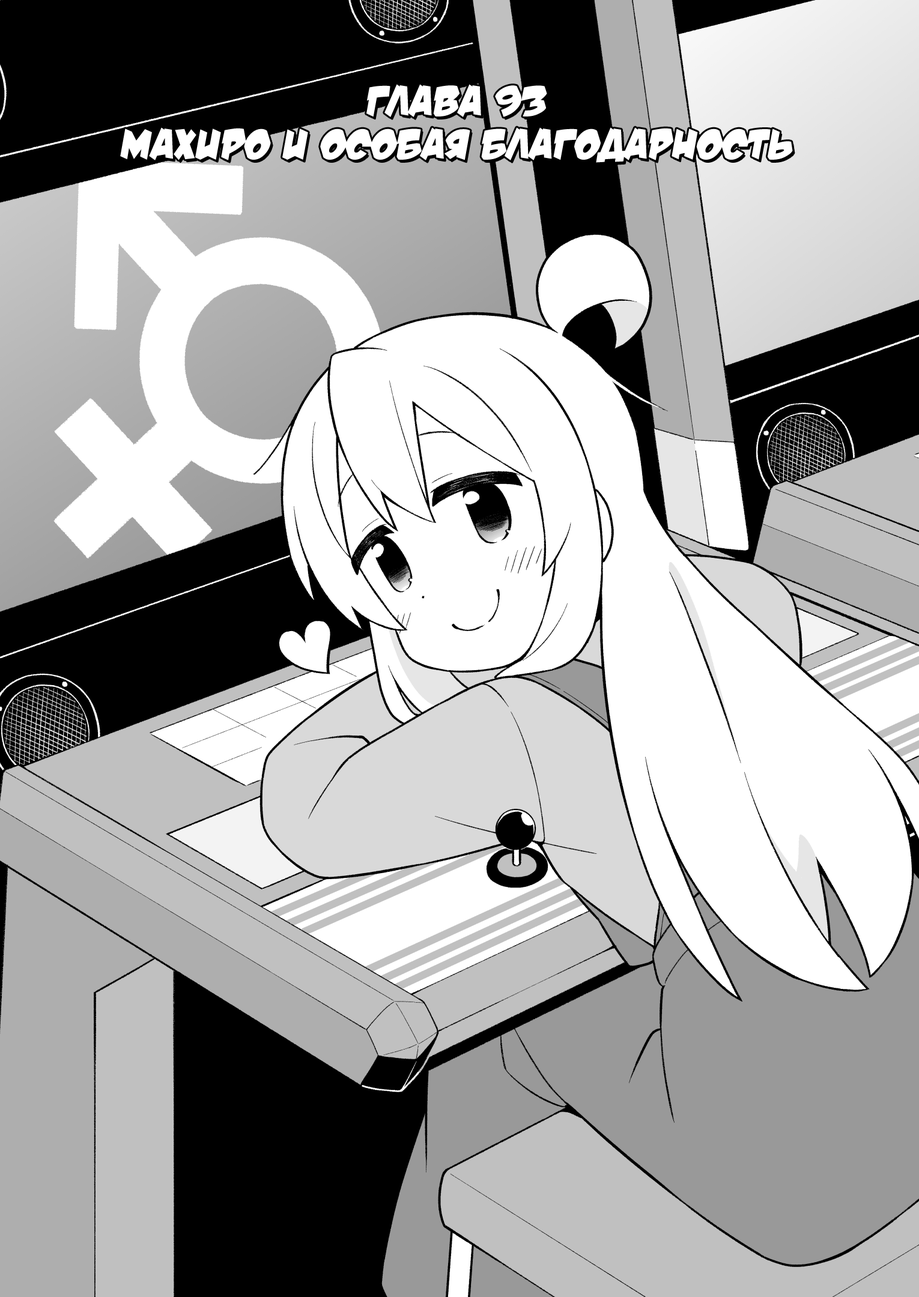
<style>
.page{position:relative;width:919px;height:1297px;background:#ffffff}
.page>*{position:absolute;margin:0}
.t1{font:43.2px "v_DamnNoisyKids";color:#ffffff;text-transform:uppercase}
</style>
<div class="page">
<p class="t1" style="left:120px;top:84px;width:673px;height:79px;text-align:center">Глава 93<br>Махиро и особая благодарность</p>
</div>
